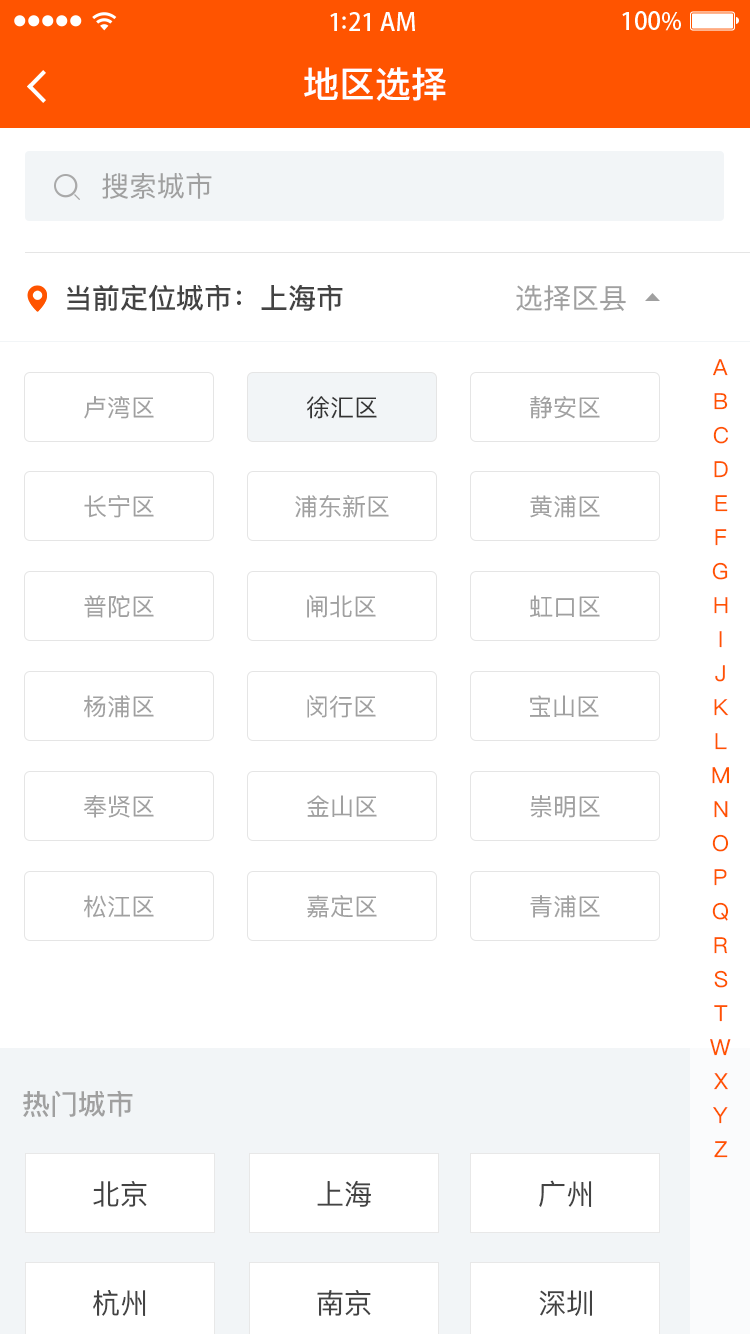
<style>
.page{position:relative;width:750px;height:1334px;background:#ffffff}
.page>*{position:absolute;margin:0}
.t1{font:36px "PingFangSC-Medium";color:#ffffff}
.t2{font:28px "PingFangSC-Regular";color:#a0a0a0}
.t3{font:28px "PingFangSC-Medium";color:#434343}
.t4{font:22px/38px "PingFangSC-Regular";color:#ff5400}
.t5{font:24px "PingFangSC-Regular";color:#a0a0a0}
.t6{font:24px "PingFangSC-Regular";color:#333333}
.t7{font:28px "PingFangSC-Medium";color:#a0a0a0}
.t8{font:28px "PingFangSC-Regular";color:#434343}
</style>
<div class="page">
<p class="t1" style="left:304px;top:67px;width:142px;height:34px">地区选择</p>
<p class="t2" style="left:102px;top:172px;width:110px;height:27px">搜索城市</p>
<p class="t3" style="left:67px;top:284px;width:276px;height:27px">当前定位城市：上海市</p>
<p class="t2" style="left:516px;top:284px;width:110px;height:27px">选择区县</p>
<p class="t4" style="left:710px;top:359px;width:21px;height:799px;text-align:center">A<br>B<br>C<br>D<br>E<br>F<br>G<br>H<br>I<br>J<br>K<br>L<br>M<br>N<br>O<br>P<br>Q<br>R<br>S<br>T<br>W<br>X<br>Y<br>Z</p>
<p class="t5" style="left:84px;top:396px;width:70px;height:23px">卢湾区</p>
<p class="t6" style="left:307px;top:396px;width:70px;height:23px">徐汇区</p>
<p class="t5" style="left:530px;top:396px;width:70px;height:23px">静安区</p>
<p class="t5" style="left:84px;top:495px;width:70px;height:23px">长宁区</p>
<p class="t5" style="left:295px;top:495px;width:94px;height:23px">浦东新区</p>
<p class="t5" style="left:530px;top:495px;width:70px;height:23px">黄浦区</p>
<p class="t5" style="left:84px;top:595px;width:70px;height:23px">普陀区</p>
<p class="t5" style="left:307px;top:595px;width:69px;height:23px">闸北区</p>
<p class="t5" style="left:530px;top:595px;width:70px;height:23px">虹口区</p>
<p class="t5" style="left:84px;top:695px;width:70px;height:23px">杨浦区</p>
<p class="t5" style="left:307px;top:695px;width:69px;height:23px">闵行区</p>
<p class="t5" style="left:530px;top:695px;width:69px;height:22px">宝山区</p>
<p class="t5" style="left:83px;top:795px;width:71px;height:23px">奉贤区</p>
<p class="t5" style="left:307px;top:795px;width:70px;height:22px">金山区</p>
<p class="t5" style="left:530px;top:795px;width:70px;height:23px">崇明区</p>
<p class="t5" style="left:84px;top:895px;width:70px;height:23px">松江区</p>
<p class="t5" style="left:307px;top:895px;width:70px;height:23px">嘉定区</p>
<p class="t5" style="left:530px;top:895px;width:70px;height:23px">青浦区</p>
<p class="t7" style="left:23px;top:1090px;width:110px;height:27px">热门城市</p>
<p class="t8" style="left:93px;top:1181px;width:54px;height:26px">北京</p>
<p class="t8" style="left:317px;top:1180px;width:54px;height:27px">上海</p>
<p class="t8" style="left:539px;top:1180px;width:53px;height:27px">广州</p>
<p class="t8" style="left:93px;top:1290px;width:53px;height:26px">杭州</p>
<p class="t8" style="left:317px;top:1290px;width:54px;height:26px">南京</p>
<p class="t8" style="left:539px;top:1290px;width:53px;height:26px">深圳</p>
</div>
